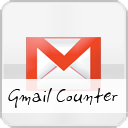
<style>
.page{position:relative;width:128px;height:128px}
.page>*{position:absolute;margin:0}
.t1{font:18px "PFLiberaPro-Regular";letter-spacing:0.01em;color:#000000}
</style>
<div class="page">
<p class="t1" style="left:8px;top:88px;width:110px;height:20px">Gmail Counter</p>
</div>
